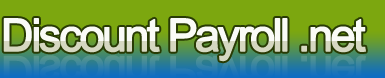
<style>
.page{position:relative;width:385px;height:78px;background:#7ca70f}
.page>*{position:absolute;margin:0}
.t1{font:45px "ArialMT";letter-spacing:-0.08em;color:#ffffff;font-weight:bold}
</style>
<div class="page">
<p class="t1" style="left:3px;top:18px;width:363px;height:44px">Discount Payroll .net</p>
</div>
